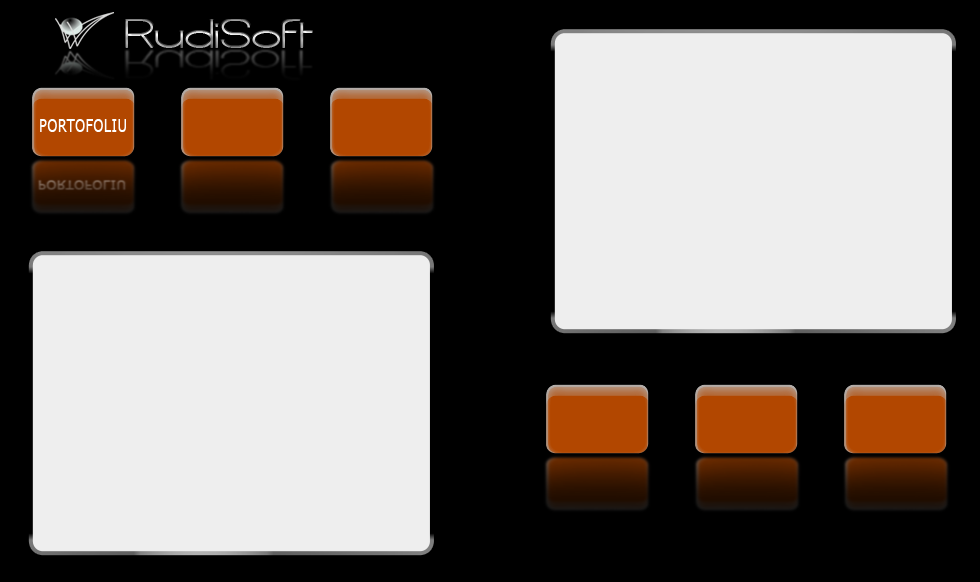
<style>
.page{position:relative;width:980px;height:582px;background:#000000}
.page>*{position:absolute;margin:0}
.t1{font:48px "CastorgateWide";letter-spacing:0.05em;scale:0.7 1}
.t2{font:18px "Verdana";letter-spacing:0.05em;color:#ffffff;scale:0.7 1}
</style>
<div class="page">
<p class="t1" style="left:125px;top:19px;width:188px;height:29px">RudiSoft</p>
<p class="t2" style="left:40px;top:119px;width:86px;height:13px">PORTOFOLIU</p>
</div>
